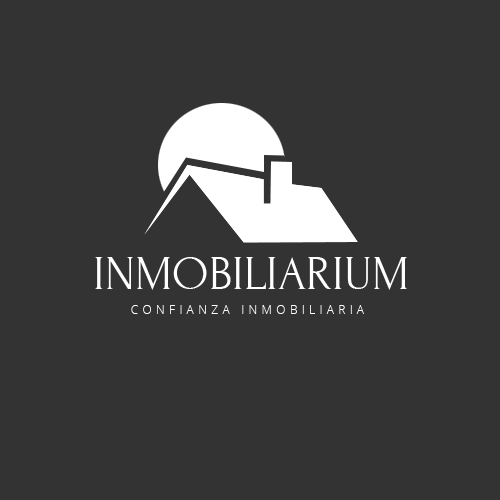
<style>
.page{position:relative;width:500px;height:500px;background:#333333}
.page>*{position:absolute;margin:0}
.t1{font:48px "Forum";color:#ffffff}
.t2{font:12.4px "OpenSans-Light";letter-spacing:0.33em;color:#ffffff}
</style>
<div class="page">
<p class="t1" style="left:95px;top:257px;width:312px;height:33px">INMOBILIARIUM</p>
<p class="t2" style="left:131px;top:305px;width:233px;height:9px">CONFIANZA INMOBILIARIA</p>
</div>
